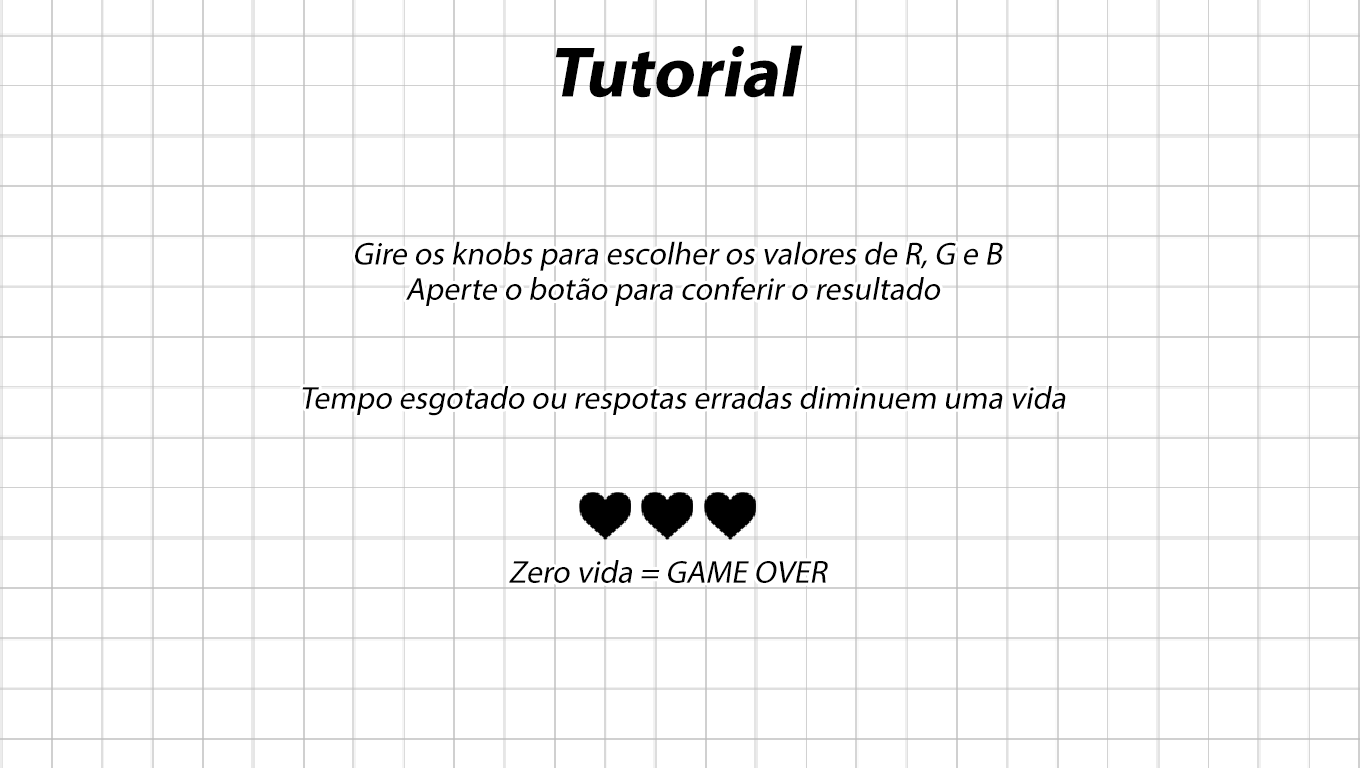
<style>
.page{position:relative;width:1360px;height:768px;background:#ffffff}
.page>*{position:absolute;margin:0}
.t1{font:72px "MyriadPro-Bold";color:#000000;font-style:italic}
.t2{font:32px "MyriadPro-Regular";color:#000000;font-style:italic}
</style>
<div class="page">
<p class="t1" style="left:555px;top:45px;width:248px;height:53px">Tutorial</p>
<p class="t2" style="left:355px;top:241px;width:648px;height:30px">Gire os knobs para escolher os valores de R, G e B</p>
<p class="t2" style="left:406px;top:276px;width:535px;height:30px">Aperte o botão para conferir o resultado</p>
<p class="t2" style="left:302px;top:386px;width:764px;height:30px">Tempo esgotado ou respotas erradas diminuem uma vida</p>
<p class="t2" style="left:509px;top:560px;width:319px;height:23px">Zero vida = GAME OVER</p>
</div>
